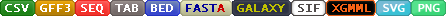
<style>
.page{position:relative;width:446px;height:16px}
.page>*{position:absolute;margin:0}
.t1{font:12px "LucidaConsole";color:#ffffff;font-weight:bold}
.t2{font:12px "LucidaConsole";color:#000099;font-weight:bold}
.t3{font:12px "LucidaConsole";color:#cc0000;font-weight:bold}
.t4{font:12px "LucidaConsole";color:#c1c100;font-weight:bold}
.t5{font:12px "LucidaConsole";color:#504b4a;font-weight:bold}
.t6{font:12px "LucidaConsole";color:#f66215;font-weight:bold}
</style>
<div class="page">
<p class="t1" style="left:5px;top:4px;width:24px;height:8px">CSV</p>
<p class="t1" style="left:40px;top:4px;width:30px;height:8px">GFF3</p>
<p class="t1" style="left:81px;top:4px;width:23px;height:10px">SEQ</p>
<p class="t1" style="left:115px;top:4px;width:23px;height:8px">TAB</p>
<p class="t1" style="left:151px;top:4px;width:22px;height:8px">BED</p>
<p class="t2" style="left:186px;top:4px;width:39px;height:8px">FAST<span class="t3">A</span></p>
<p class="t4" style="left:237px;top:4px;width:48px;height:8px">GALAXY</p>
<p class="t5" style="left:298px;top:4px;width:22px;height:8px">SIF</p>
<p class="t6" style="left:332px;top:4px;width:39px;height:8px">XGMML</p>
<p class="t1" style="left:383px;top:3px;width:22px;height:9px">SVG</p>
<p class="t1" style="left:418px;top:3px;width:22px;height:9px">PNG</p>
</div>
